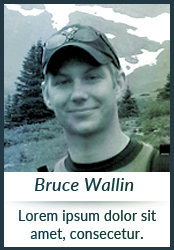
<style>
.page{position:relative;width:174px;height:250px;background:#ffffff}
.page>*{position:absolute;margin:0}
.t1{font:18px "Lato-MediumItalic";letter-spacing:0.018em;color:#223943}
.t2{font:14px/18px "Lato-Regular";letter-spacing:0.018em;color:#223943}
</style>
<div class="page">
<p class="t1" style="left:35px;top:178px;width:99px;height:13px">Bruce Wallin</p>
<p class="t2" style="left:19px;top:210px;width:137px;height:31px;text-align:center">Lorem ipsum dolor sit amet, consecetur.</p>
</div>
